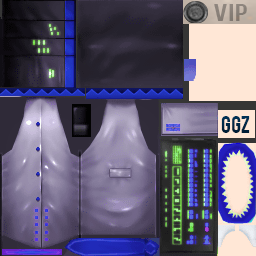
<style>
.page{position:relative;width:256px;height:256px}
.page>*{position:absolute;margin:0}
.t1{font:18.7px "Bebas";color:#898179;scale:1.35 1}
.t2{font:18.7px "Bebas";color:#002746}
</style>
<div class="page">
<p class="t1" style="left:214px;top:4px;width:33px;height:17px">VIP</p>
<p class="t2" style="left:221px;top:116px;width:29px;height:17px">GGZ</p>
</div>
